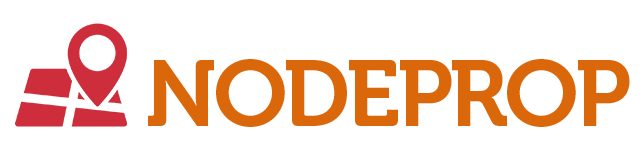
<style>
.page{position:relative;width:642px;height:168px;background:#ffffff}
.page>*{position:absolute;margin:0}
.t1{font:92.4px "Museo700-Regular";letter-spacing:-0.04em;color:#da6709;text-transform:uppercase}
</style>
<div class="page">
<p class="t1" style="left:148px;top:59px;width:482px;height:68px">nodeprop</p>
</div>
